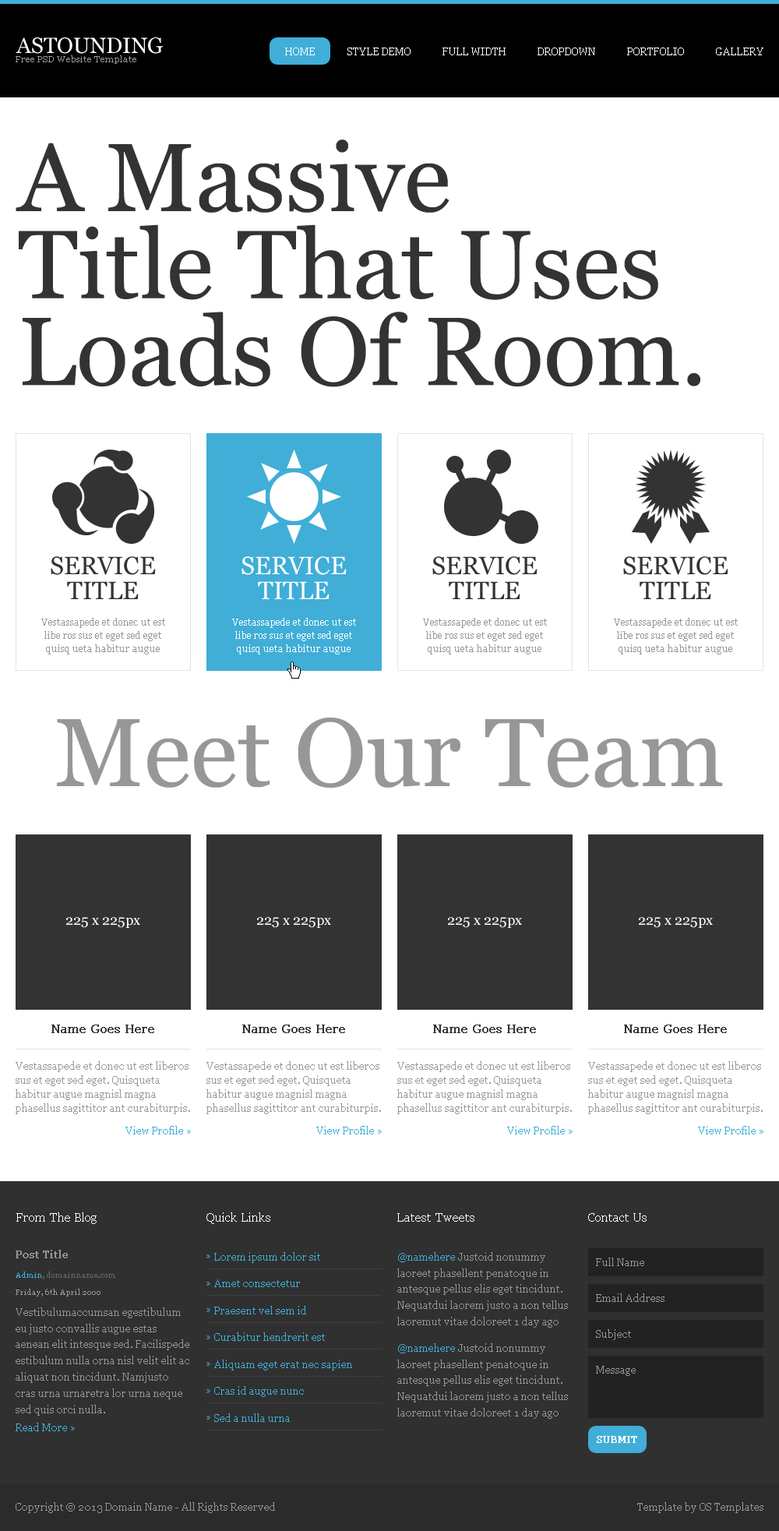
<style>
.page{position:relative;width:779px;height:1531px;background:#ffffff}
.page>*{position:absolute;margin:0}
.t1{font:21.8px "Georgia";color:#ffffff}
.t2{font:10.1px "Georgia";color:#ffffff}
.t3{font:8.6px "Georgia";color:#979797}
.t4{font:96.6px/86.9px "Georgia";color:#333333}
.t5{font:24.9px/24.9px "Georgia";color:#333333}
.t6{font:24.9px/24.9px "Georgia";color:#ffffff}
.t7{font:9.3px/13.1px "Georgia";color:#979797}
.t8{font:9.3px/13.1px "Georgia";color:#ffffff}
.t9{font:96.6px "Georgia";color:#979797}
.t10{font:14px "Georgia";color:#ffffff}
.t11{font:12.5px "Georgia";color:#333333;font-weight:bold}
.t12{font:10.1px/14.2px "Georgia";color:#979797}
.t13{font:10.1px "Georgia";color:#40aed7}
.t14{font:12.5px "Georgia";color:#ffffff}
.t15{font:10.1px "Georgia";color:#979797;font-weight:bold}
.t16{font:10.1px/26.8px "Georgia";color:#40aed7}
.t17{font:10.1px/16.2px "Georgia";color:#979797}
.t18{font:10.1px/16.2px "Georgia";color:#3fadd7}
.t19{font:10.1px "Georgia";color:#989898}
.t20{font:7.8px "Georgia";color:#666666}
.t21{font:7.8px "Georgia";color:#3fadd7}
.t22{font:7.8px "Georgia";color:#979797}
.t23{font:9.3px "Georgia";color:#ffffff;font-weight:bold}
.t24{font:10.1px "Georgia";color:#979797}
</style>
<div class="page">
<p class="t1" style="left:16px;top:37px;width:147px;height:17px">ASTOUNDING</p>
<p class="t2" style="left:285px;top:48px;width:30px;height:7px">HOME</p>
<p class="t2" style="left:347px;top:48px;width:64px;height:7px">STYLE DEMO</p>
<p class="t2" style="left:442px;top:48px;width:64px;height:7px">FULL WIDTH</p>
<p class="t2" style="left:538px;top:48px;width:57px;height:7px">DROPDOWN</p>
<p class="t2" style="left:627px;top:48px;width:57px;height:7px">PORTFOLIO</p>
<p class="t2" style="left:716px;top:48px;width:47px;height:7px">GALLERY</p>
<p class="t3" style="left:16px;top:55px;width:120px;height:9px">Free PSD Website Template</p>
<p class="t4" style="left:16px;top:139px;width:684px;height:248px">A Massive<br>Title That Uses<br>Loads Of Room.</p>
<p class="t5" style="left:51px;top:556px;width:105px;height:43px;text-align:center">SERVICE<br>TITLE</p>
<p class="t6" style="left:241px;top:556px;width:106px;height:43px;text-align:center">SERVICE<br>TITLE</p>
<p class="t5" style="left:432px;top:556px;width:106px;height:43px;text-align:center">SERVICE<br>TITLE</p>
<p class="t5" style="left:623px;top:556px;width:105px;height:43px;text-align:center">SERVICE<br>TITLE</p>
<p class="t7" style="left:41px;top:618px;width:124px;height:36px;text-align:center">Vestassapede et donec ut est libe ros sus et eget sed eget quisq ueta habitur augue</p>
<p class="t8" style="left:232px;top:618px;width:124px;height:36px;text-align:center">Vestassapede et donec ut est libe ros sus et eget sed eget quisq ueta habitur augue</p>
<p class="t7" style="left:423px;top:618px;width:124px;height:36px;text-align:center">Vestassapede et donec ut est libe ros sus et eget sed eget quisq ueta habitur augue</p>
<p class="t7" style="left:614px;top:618px;width:124px;height:36px;text-align:center">Vestassapede et donec ut est libe ros sus et eget sed eget quisq ueta habitur augue</p>
<p class="t9" style="left:56px;top:717px;width:667px;height:71px">Meet Our Team</p>
<p class="t10" style="left:66px;top:917px;width:74px;height:11px">225 x 225px</p>
<p class="t10" style="left:257px;top:917px;width:74px;height:11px">225 x 225px</p>
<p class="t10" style="left:448px;top:917px;width:74px;height:11px">225 x 225px</p>
<p class="t10" style="left:639px;top:917px;width:74px;height:11px">225 x 225px</p>
<p class="t11" style="left:51px;top:1024px;width:103px;height:9px">Name Goes Here</p>
<p class="t11" style="left:242px;top:1024px;width:103px;height:9px">Name Goes Here</p>
<p class="t11" style="left:433px;top:1024px;width:103px;height:9px">Name Goes Here</p>
<p class="t11" style="left:624px;top:1024px;width:103px;height:9px">Name Goes Here</p>
<p class="t12" style="left:16px;top:1061px;width:174px;height:53px">Vestassapede et donec ut est liberos sus et eget sed eget. Quisqueta habitur augue magnisl magna phasellus sagittitor ant curabiturpis.</p>
<p class="t12" style="left:206px;top:1061px;width:175px;height:53px">Vestassapede et donec ut est liberos sus et eget sed eget. Quisqueta habitur augue magnisl magna phasellus sagittitor ant curabiturpis.</p>
<p class="t12" style="left:397px;top:1061px;width:175px;height:53px">Vestassapede et donec ut est liberos sus et eget sed eget. Quisqueta habitur augue magnisl magna phasellus sagittitor ant curabiturpis.</p>
<p class="t12" style="left:588px;top:1061px;width:175px;height:53px">Vestassapede et donec ut est liberos sus et eget sed eget. Quisqueta habitur augue magnisl magna phasellus sagittitor ant curabiturpis.</p>
<p class="t13" style="left:125px;top:1126px;width:66px;height:8px">View Profile »</p>
<p class="t13" style="left:316px;top:1126px;width:66px;height:8px">View Profile »</p>
<p class="t13" style="left:507px;top:1126px;width:66px;height:8px">View Profile »</p>
<p class="t13" style="left:698px;top:1126px;width:65px;height:8px">View Profile »</p>
<p class="t14" style="left:16px;top:1212px;width:81px;height:12px">From The Blog</p>
<p class="t14" style="left:206px;top:1212px;width:64px;height:12px">Quick Links</p>
<p class="t14" style="left:397px;top:1213px;width:77px;height:8px">Latest Tweets</p>
<p class="t14" style="left:588px;top:1213px;width:59px;height:8px">Contact Us</p>
<p class="t15" style="left:16px;top:1250px;width:52px;height:8px">Post Title</p>
<p class="t16" style="left:214px;top:1252px;width:138px;height:170px">Lorem ipsum dolor sit<br>Amet consectetur<br>Praesent vel sem id<br>Curabitur hendrerit est<br>Aliquam eget erat nec sapien<br>Cras id augue nunc<br>Sed a nulla urna</p>
<p class="t17" style="left:397px;top:1252px;width:171px;height:75px"><span class="t18">@namehere</span> Justoid nonummy laoreet phasellent penatoque in antesque pellus elis eget tincidunt. Nequatdui laorem justo a non tellus laoremut vitae doloreet 1 day ago</p>
<p class="t19" style="left:596px;top:1257px;width:48px;height:9px">Full Name</p>
<p class="t20" style="left:16px;top:1271px;width:99px;height:8px"><span class="t21">Admin</span>, domainname.com</p>
<p class="t22" style="left:16px;top:1288px;width:84px;height:8px">Friday, 6th April 2000</p>
<p class="t19" style="left:596px;top:1293px;width:68px;height:9px">Email Address</p>
<p class="t17" style="left:16px;top:1307px;width:173px;height:108px">Vestibulumaccumsan egestibulum eu justo convallis augue estas aenean elit intesque sed. Facilispede estibulum nulla orna nisl velit elit ac aliquat non tincidunt. Namjusto cras urna urnaretra lor urna neque sed quis orci nulla.</p>
<p class="t19" style="left:596px;top:1329px;width:35px;height:11px">Subject</p>
<p class="t17" style="left:397px;top:1343px;width:171px;height:76px"><span class="t18">@namehere</span> Justoid nonummy laoreet phasellent penatoque in antesque pellus elis eget tincidunt. Nequatdui laorem justo a non tellus laoremut vitae doloreet 1 day ago</p>
<p class="t19" style="left:596px;top:1366px;width:40px;height:10px">Message</p>
<p class="t13" style="left:16px;top:1422px;width:59px;height:9px">Read More »</p>
<p class="t23" style="left:597px;top:1436px;width:40px;height:7px">SUBMIT</p>
<p class="t24" style="left:16px;top:1502px;width:259px;height:11px">Copyright © 2013 Domain Name - All Rights Reserved</p>
<p class="t24" style="left:637px;top:1502px;width:126px;height:11px">Template by OS Templates</p>
</div>
